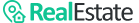
<style>
.page{position:relative;width:139px;height:23px;background:#ffffff}
.page>*{position:absolute;margin:0}
.t1{font:27.7px "Calibri";letter-spacing:-0.05em;color:#2d3134}
.t2{font:27.7px "Calibri-Bold";letter-spacing:-0.05em;color:#0fc493}
</style>
<div class="page">
<p class="t1" style="left:30px;top:1px;width:103px;height:20px"><span class="t2">Real</span>Estate</p>
</div>
